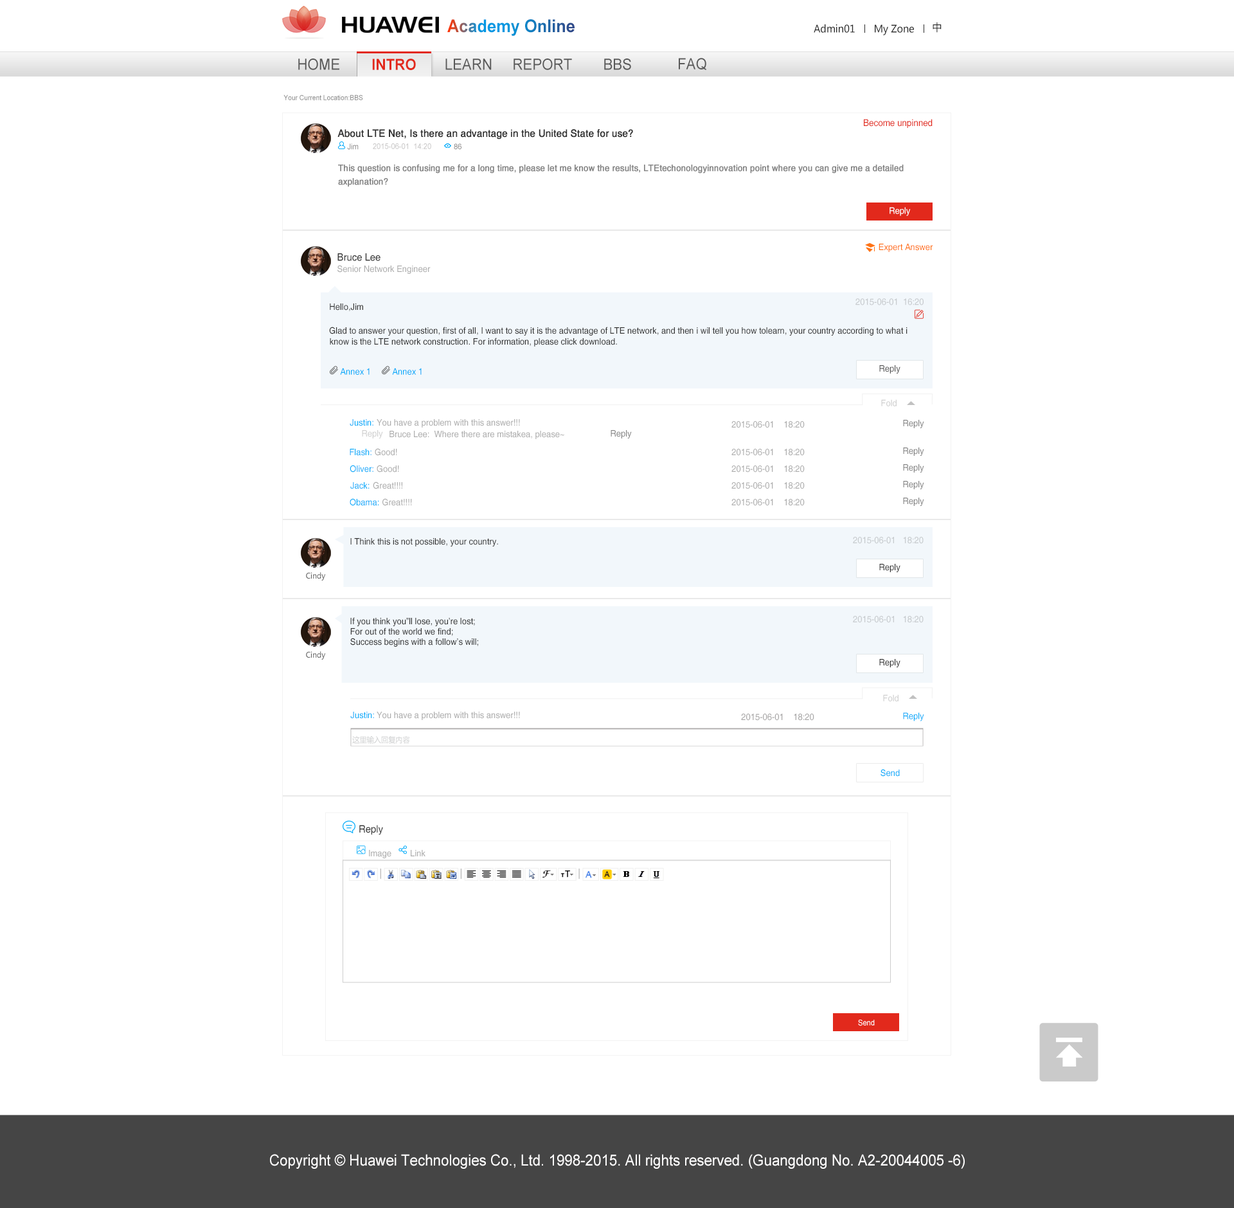
<style>
.page{position:relative;width:1234px;height:1208px;background:#ffffff}
.page>*{position:absolute;margin:0}
.t1{font:17.6px "Arial-BoldMT";scale:0.93 1}
.t2{font:10.3px "MicrosoftYaHei";color:#2a2a2a;scale:0.93 1}
.t3{font:15.4px "ArialMT";color:#585858;scale:0.93 1}
.t4{font:15.4px "Arial-BoldMT";color:#e2291c;scale:0.93 1}
.t5{font:7.1px "ArialMT";color:#8d8d8d;scale:0.93 1}
.t6{font:9.3px "Helvetica";color:#e2291c;scale:0.93 1}
.t7{font:10.3px "Helvetica";color:#333333;font-weight:bold;scale:0.93 1}
.t8{font:7.7px "ArialMT";color:#8b8888;scale:0.93 1}
.t9{font:7.7px "ArialMT";color:#c8c7c7;scale:0.93 1}
.t10{font:9px "Helvetica";color:#848484;font-weight:bold;scale:0.93 1}
.t11{font:9px "Helvetica";color:#ffffff;scale:0.93 1}
.t12{font:9px "Helvetica";color:#ff7316;scale:0.93 1}
.t13{font:10.3px "Helvetica";color:#333333;scale:0.93 1}
.t14{font:9px "Helvetica";color:#adadad;scale:0.93 1}
.t15{font:9px "Helvetica";color:#333333;scale:0.93 1}
.t16{font:9px "Helvetica";color:#c6cacd;scale:0.93 1}
.t17{font:9px "Helvetica";color:#585858;scale:0.93 1}
.t18{font:9px "Helvetica";color:#05acfa;scale:0.93 1}
.t19{font:9px "Helvetica";color:#d0d0d0;scale:0.93 1}
.t20{font:9px "Helvetica";color:#848484;scale:0.93 1}
.t21{font:7.7px "MicrosoftYaHei";color:#585858;scale:0.93 1}
.t22{font:9px "Helvetica";color:#a6a5a5;scale:0.93 1}
.t23{font:7.7px "MicrosoftYaHei";color:#cccdce;scale:0.93 1}
.t24{font:7.7px "ArialMT";color:#ffffff;scale:0.93 1}
.t25{font:15.4px "ArialMT";color:#fffefe;scale:0.93 1}
</style>
<div class="page">
<p class="t1" style="left:447px;top:19px;width:128px;height:17px">Academy Online</p>
<p class="t2" style="left:814px;top:24px;width:41px;height:9px">Admin01</p>
<p class="t2" style="left:875px;top:24px;width:39px;height:11px">My Zone</p>
<p class="t2" style="left:933px;top:22px;width:9px;height:11px">中</p>
<p class="t3" style="left:298px;top:59px;width:41px;height:11px">HOME</p>
<p class="t4" style="left:372px;top:59px;width:44px;height:11px">INTRO</p>
<p class="t3" style="left:446px;top:59px;width:46px;height:11px">LEARN</p>
<p class="t3" style="left:514px;top:59px;width:58px;height:11px">REPORT</p>
<p class="t3" style="left:604px;top:59px;width:27px;height:11px">BBS</p>
<p class="t3" style="left:679px;top:58px;width:27px;height:12px">FAQ</p>
<p class="t5" style="left:284px;top:94px;width:79px;height:6px">Your Current Location:BBS</p>
<p class="t6" style="left:864px;top:119px;width:69px;height:9px">Become unpinned</p>
<p class="t7" style="left:338px;top:129px;width:295px;height:11px">About LTE Net, Is there an advantage in the United State for use?</p>
<p class="t8" style="left:347px;top:143px;width:12px;height:7px">Jim</p>
<p class="t9" style="left:373px;top:143px;width:58px;height:6px">2015-06-01  14:20</p>
<p class="t8" style="left:454px;top:143px;width:8px;height:7px">86</p>
<p class="t10" style="left:338px;top:164px;width:566px;height:10px">This question is confusing me for a long time, please let me know the results, LTEtechonologyinnovation point where you can give me a detailed</p>
<p class="t10" style="left:338px;top:178px;width:50px;height:9px">axplanation?</p>
<p class="t11" style="left:890px;top:207px;width:21px;height:9px">Reply</p>
<p class="t12" style="left:879px;top:244px;width:54px;height:8px">Expert Answer</p>
<p class="t13" style="left:338px;top:253px;width:43px;height:8px">Bruce Lee</p>
<p class="t14" style="left:338px;top:265px;width:93px;height:9px">Senior Network Engineer</p>
<p class="t15" style="left:330px;top:303px;width:33px;height:8px">Hello,Jim</p>
<p class="t16" style="left:856px;top:298px;width:68px;height:7px">2015-06-01  16:20</p>
<p class="t15" style="left:329px;top:327px;width:579px;height:9px">Glad to answer your question, first of all, I want to say it is the advantage of LTE network, and then i wil tell you how tolearn, your country according to what i</p>
<p class="t15" style="left:330px;top:338px;width:287px;height:8px">know is the LTE network construction. For information, please click download.</p>
<p class="t17" style="left:879px;top:365px;width:22px;height:9px">Reply</p>
<p class="t18" style="left:340px;top:368px;width:30px;height:7px">Annex 1</p>
<p class="t18" style="left:392px;top:368px;width:30px;height:7px">Annex 1</p>
<p class="t19" style="left:881px;top:399px;width:16px;height:7px">Fold</p>
<p class="t18" style="left:350px;top:419px;width:24px;height:7px">Justin:</p>
<p class="t14" style="left:377px;top:419px;width:143px;height:9px">You have a problem with this answer!!!</p>
<p class="t14" style="left:732px;top:421px;width:73px;height:7px">2015-06-01    18:20</p>
<p class="t20" style="left:903px;top:420px;width:21px;height:8px">Reply</p>
<p class="t19" style="left:362px;top:430px;width:21px;height:8px">Reply</p>
<p class="t14" style="left:390px;top:431px;width:174px;height:8px">Bruce Lee:  Where there are mistakea, please~</p>
<p class="t20" style="left:611px;top:430px;width:21px;height:8px">Reply</p>
<p class="t18" style="left:350px;top:449px;width:22px;height:7px">Flash:</p>
<p class="t14" style="left:375px;top:448px;width:22px;height:8px">Good!</p>
<p class="t14" style="left:732px;top:449px;width:73px;height:7px">2015-06-01    18:20</p>
<p class="t20" style="left:903px;top:447px;width:21px;height:9px">Reply</p>
<p class="t18" style="left:350px;top:465px;width:24px;height:8px">Oliver:</p>
<p class="t14" style="left:377px;top:465px;width:22px;height:8px">Good!</p>
<p class="t14" style="left:732px;top:465px;width:73px;height:8px">2015-06-01    18:20</p>
<p class="t20" style="left:903px;top:464px;width:21px;height:9px">Reply</p>
<p class="t18" style="left:350px;top:482px;width:20px;height:7px">Jack:</p>
<p class="t14" style="left:373px;top:482px;width:29px;height:7px">Great!!!!</p>
<p class="t14" style="left:732px;top:482px;width:73px;height:7px">2015-06-01    18:20</p>
<p class="t20" style="left:903px;top:481px;width:21px;height:8px">Reply</p>
<p class="t20" style="left:903px;top:498px;width:21px;height:8px">Reply</p>
<p class="t18" style="left:350px;top:498px;width:29px;height:8px">Obama:</p>
<p class="t14" style="left:382px;top:498px;width:30px;height:8px">Great!!!!</p>
<p class="t14" style="left:732px;top:499px;width:73px;height:7px">2015-06-01    18:20</p>
<p class="t15" style="left:350px;top:538px;width:148px;height:8px">I Think this is not possible, your country.</p>
<p class="t16" style="left:853px;top:537px;width:71px;height:7px">2015-06-01   18:20</p>
<p class="t15" style="left:879px;top:564px;width:22px;height:8px">Reply</p>
<p class="t21" style="left:306px;top:572px;width:20px;height:8px">Cindy</p>
<p class="t15" style="left:350px;top:617px;width:125px;height:9px">If you think you”ll lose, you’re lost;</p>
<p class="t16" style="left:853px;top:616px;width:71px;height:7px">2015-06-01   18:20</p>
<p class="t15" style="left:350px;top:627px;width:103px;height:9px">For out of the world we find;</p>
<p class="t15" style="left:350px;top:638px;width:128px;height:9px">Success begins with a follow’s will;</p>
<p class="t21" style="left:306px;top:651px;width:20px;height:9px">Cindy</p>
<p class="t15" style="left:879px;top:659px;width:22px;height:8px">Reply</p>
<p class="t19" style="left:883px;top:694px;width:16px;height:7px">Fold</p>
<p class="t18" style="left:350px;top:712px;width:24px;height:7px">Justin:</p>
<p class="t14" style="left:377px;top:712px;width:143px;height:8px">You have a problem with this answer!!!</p>
<p class="t22" style="left:741px;top:714px;width:74px;height:7px">2015-06-01    18:20</p>
<p class="t18" style="left:903px;top:712px;width:21px;height:9px">Reply</p>
<p class="t23" style="left:352px;top:735px;width:58px;height:9px">这里输入回复内容</p>
<p class="t18" style="left:881px;top:769px;width:19px;height:8px">Send</p>
<p class="t13" style="left:359px;top:825px;width:24px;height:10px">Reply</p>
<p class="t14" style="left:369px;top:850px;width:23px;height:8px">Image</p>
<p class="t14" style="left:411px;top:850px;width:15px;height:6px">Link</p>
<p class="t24" style="left:858px;top:1020px;width:17px;height:6px">Send</p>
<p class="t25" style="left:270px;top:1154px;width:695px;height:15px">Copyright © Huawei Technologies Co., Ltd. 1998-2015. All rights reserved. (Guangdong No. A2-20044005 -6)</p>
</div>
